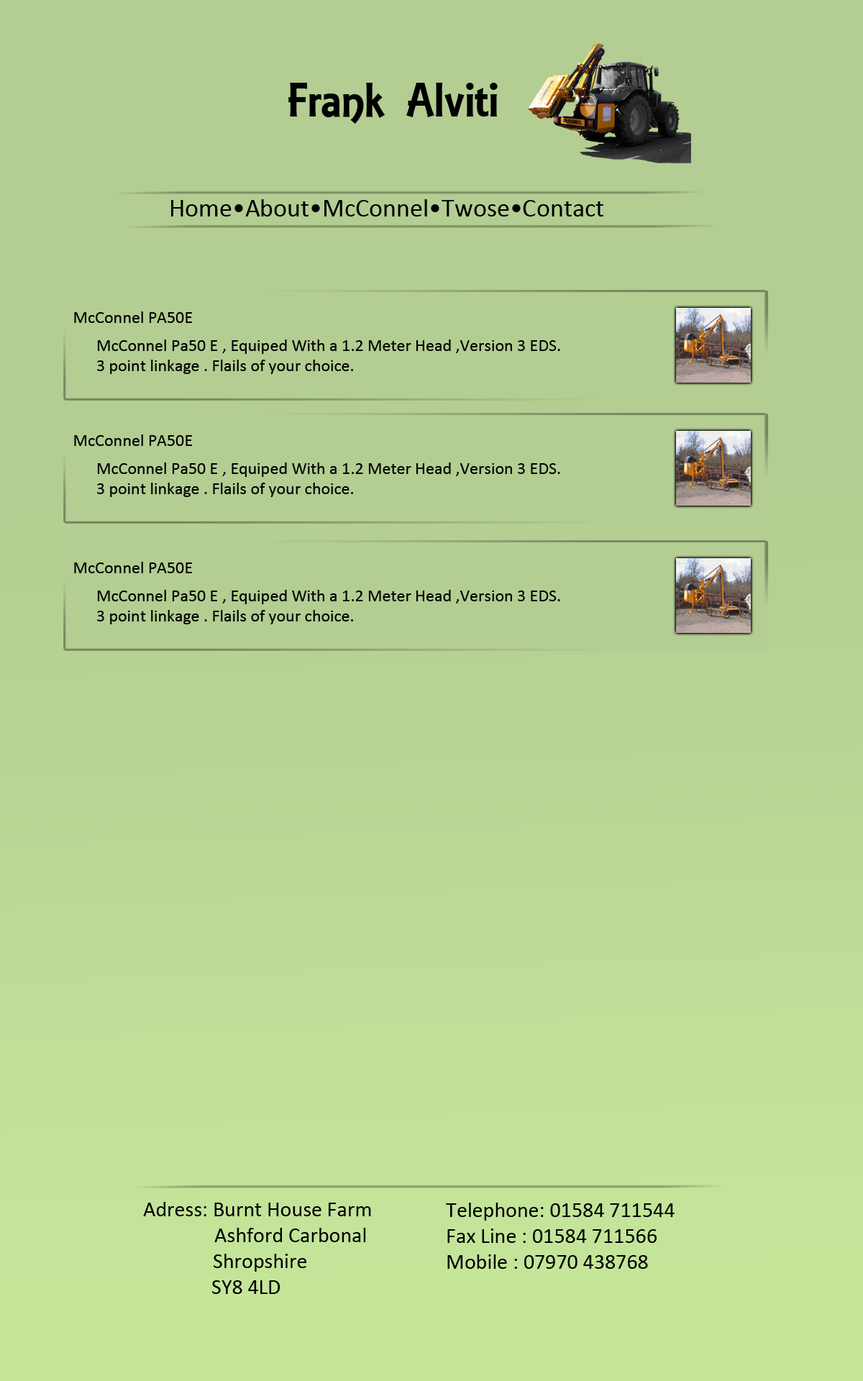
<style>
.page{position:relative;width:863px;height:1381px;background:#b4cd92}
.page>*{position:absolute;margin:0}
.t1{font:51.8px "ARESSENCE";color:#000000}
.t2{font:25.9px "Calibri";color:#000000}
.t3{font:17.3px "Calibri";color:#000000}
.t4{font:21.6px "Calibri";color:#000000}
</style>
<div class="page">
<p class="t1" style="left:288px;top:83px;width:210px;height:41px">Frank Alviti</p>
<p class="t2" style="left:171px;top:199px;width:433px;height:18px">Home•About•McConnel•Twose•Contact</p>
<p class="t3" style="left:74px;top:312px;width:118px;height:11px">McConnel PA50E</p>
<p class="t3" style="left:97px;top:340px;width:463px;height:34px">McConnel Pa50 E , Equiped With a 1.2 Meter Head ,Version 3 EDS.<br>3 point linkage . Flails of your choice.</p>
<p class="t3" style="left:74px;top:435px;width:118px;height:11px">McConnel PA50E</p>
<p class="t3" style="left:97px;top:463px;width:463px;height:34px">McConnel Pa50 E , Equiped With a 1.2 Meter Head ,Version 3 EDS.<br>3 point linkage . Flails of your choice.</p>
<p class="t3" style="left:74px;top:562px;width:118px;height:11px">McConnel PA50E</p>
<p class="t3" style="left:97px;top:590px;width:463px;height:34px">McConnel Pa50 E , Equiped With a 1.2 Meter Head ,Version 3 EDS.<br>3 point linkage . Flails of your choice.</p>
<p class="t4" style="left:143px;top:1202px;width:228px;height:92px">Adress: Burnt House Farm<br>      Ashford Carbonal<br>              Shropshire<br>              SY8 4LD</p>
<p class="t4" style="left:446px;top:1203px;width:229px;height:66px">Telephone: 01584 711544<br>Fax Line : 01584 711566<br>Mobile : 07970 438768</p>
</div>
